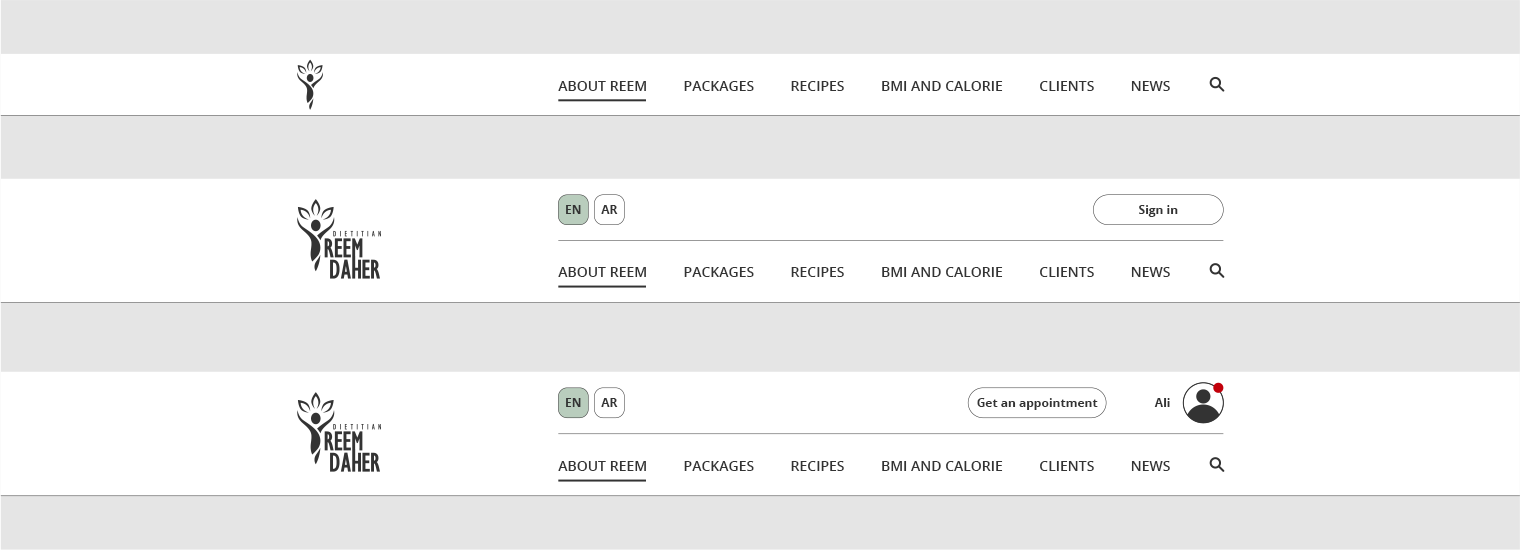
<style>
.page{position:relative;width:1520px;height:550px;background:#ffffff}
.page>*{position:absolute;margin:0}
.t1{font:14px "OpenSans-Semibold";color:#333333;text-transform:uppercase}
.t2{font:12px "OpenSans-Bold";color:#333333;text-transform:uppercase}
.t3{font:12px "OpenSans-Bold";color:#333333}
</style>
<div class="page">
<p class="t1" style="left:558px;top:81px;width:612px;height:10px">about reem          Packages          recipes          BMI and Calorie          clients          news</p>
<p class="t2" style="left:566px;top:205px;width:15px;height:9px">en</p>
<p class="t2" style="left:601px;top:205px;width:17px;height:9px">AR</p>
<p class="t3" style="left:1139px;top:205px;width:39px;height:12px">Sign in</p>
<p class="t1" style="left:558px;top:267px;width:612px;height:10px">about reem          Packages          recipes          BMI and Calorie          clients          news</p>
<p class="t2" style="left:566px;top:398px;width:15px;height:9px">en</p>
<p class="t2" style="left:601px;top:398px;width:17px;height:9px">AR</p>
<p class="t3" style="left:977px;top:398px;width:121px;height:12px">Get an appointment</p>
<p class="t3" style="left:1154px;top:398px;width:16px;height:9px">Ali</p>
<p class="t1" style="left:558px;top:461px;width:612px;height:10px">about reem          Packages          recipes          BMI and Calorie          clients          news</p>
</div>
